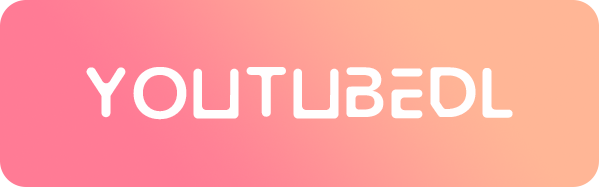
<style>
.page{position:relative;width:600px;height:187px}
.page>*{position:absolute;margin:0}
.t1{font:72px "RivieraRegular";letter-spacing:0.01em;color:#fffefe}
</style>
<div class="page">
<p class="t1" style="left:86px;top:67px;width:427px;height:53px">YouTubeDL</p>
</div>
